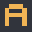
<style>
.page{position:relative;width:32px;height:32px;background:#31343c}
.page>*{position:absolute;margin:0}
.t1{font:34.6px "Uni0554";color:#f1b455}
</style>
<div class="page">
<p class="t1" style="left:5px;top:4px;width:22px;height:22px">A</p>
</div>
